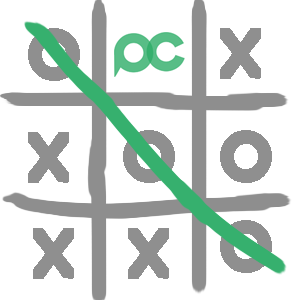
<style>
.page{position:relative;width:300px;height:300px;background:#ffffff}
.page>*{position:absolute;margin:0}
.t1{font:75px "BerlinSansFBDemi-Bold";color:#8f8f8f}
</style>
<div class="page">
<p class="t1" style="left:28px;top:28px;width:52px;height:53px">O</p>
<p class="t1" style="left:220px;top:28px;width:41px;height:51px">X</p>
<p class="t1" style="left:28px;top:132px;width:41px;height:51px">X</p>
<p class="t1" style="left:123px;top:130px;width:52px;height:53px">O</p>
<p class="t1" style="left:220px;top:130px;width:52px;height:53px">O</p>
<p class="t1" style="left:220px;top:220px;width:52px;height:53px">O</p>
<p class="t1" style="left:33px;top:228px;width:41px;height:51px">X</p>
<p class="t1" style="left:128px;top:228px;width:41px;height:51px">X</p>
</div>
